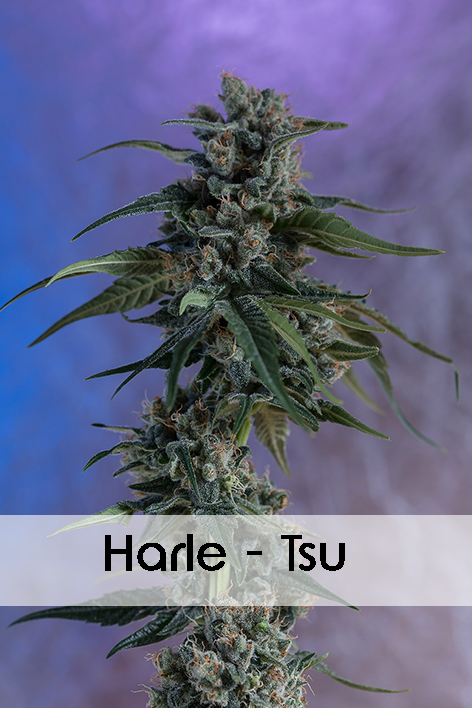
<style>
.page{position:relative;width:472px;height:708px}
.page>*{position:absolute;margin:0}
.t1{font:48.1px "RoundedElegance-Regular";color:#000000;font-weight:bold}
</style>
<div class="page">
<p class="t1" style="left:105px;top:534px;width:240px;height:37px">Harle - Tsu</p>
</div>
